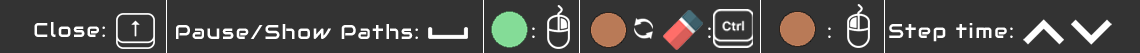
<style>
.page{position:relative;width:1140px;height:53px;background:#333333}
.page>*{position:absolute;margin:0}
.t1{font:12px "Audiowide-Regular";letter-spacing:0.08em;color:#ffffff}
</style>
<div class="page">
<p class="t1" style="left:34px;top:22px;width:71px;height:15px">Close:</p>
<p class="t1" style="left:176px;top:24px;width:242px;height:15px">Pause/Show Paths:</p>
<p class="t1" style="left:532px;top:27px;width:3px;height:11px">:</p>
<p class="t1" style="left:708px;top:27px;width:3px;height:11px">:</p>
<p class="t1" style="left:828px;top:27px;width:3px;height:11px">:</p>
<p class="t1" style="left:889px;top:23px;width:124px;height:19px">Step time:</p>
</div>
